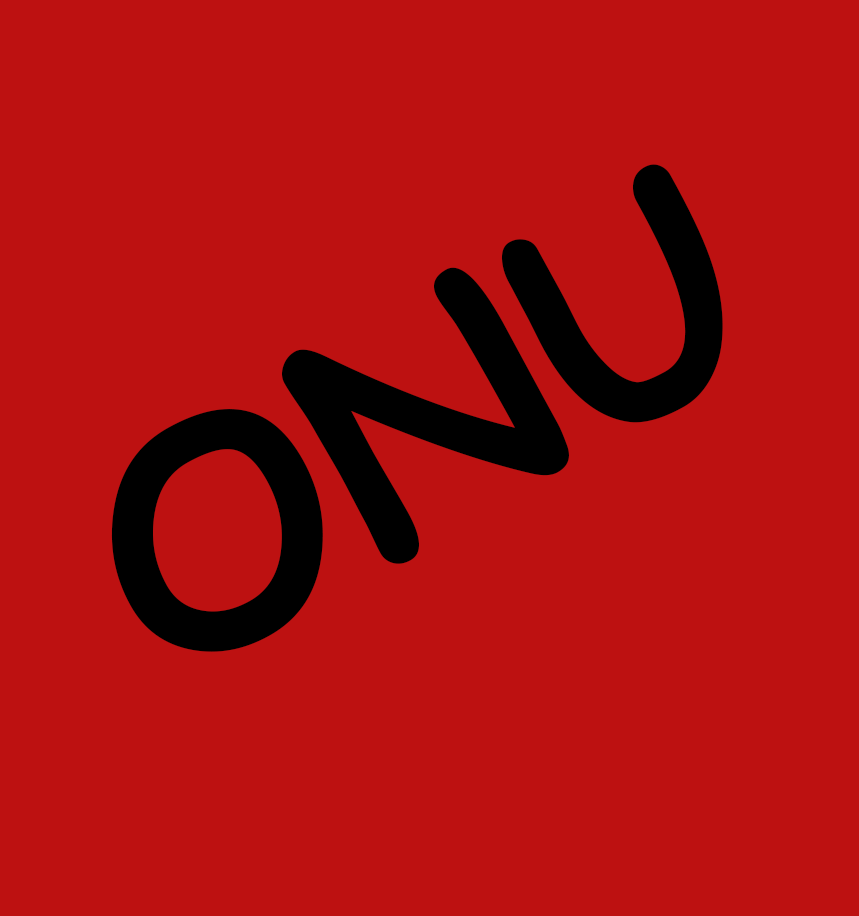
<style>
.page{position:relative;width:859px;height:916px;background:#bd1111}
.page>*{position:absolute;margin:0}
.t1{font:300px "ComicSansMS-Bold";color:#000000;font-variant:small-caps}
</style>
<div class="page">
<p class="t1" style="left:111px;top:164px;width:612px;height:488px;rotate:-29deg">ONU</p>
</div>
